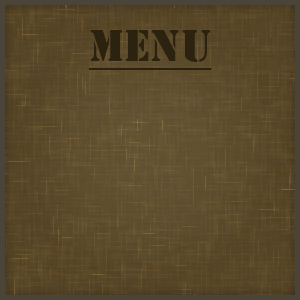
<style>
.page{position:relative;width:300px;height:300px}
.page>*{position:absolute;margin:0}
.t1{font:40px "StencilStd";color:#2c2210;text-decoration:underline}
</style>
<div class="page">
<p class="t1" style="left:89px;top:30px;width:123px;height:40px">Menu</p>
</div>
